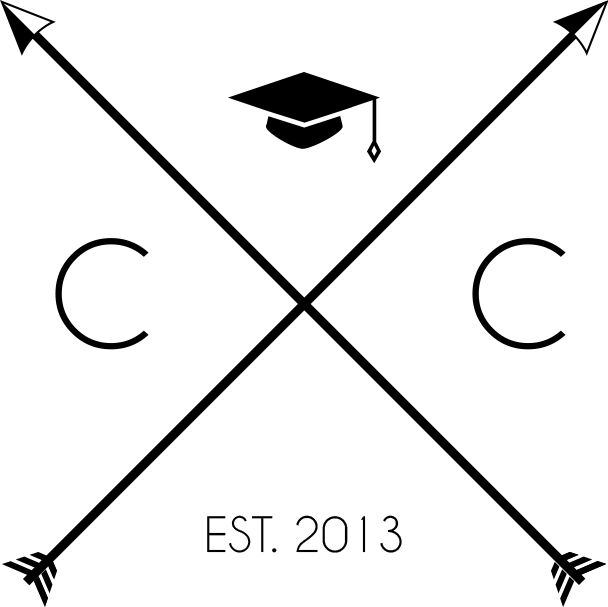
<style>
.page{position:relative;width:608px;height:607px;background:#ffffff}
.page>*{position:absolute;margin:0}
.t1{font:139.1px "CaviarDreams";color:#000000}
.t2{font:45.7px "CaviarDreams";color:#000000}
</style>
<div class="page">
<p class="t1" style="left:55px;top:238px;width:94px;height:112px">C</p>
<p class="t1" style="left:472px;top:238px;width:94px;height:112px">C</p>
<p class="t2" style="left:207px;top:515px;width:195px;height:38px">EST. 2013</p>
</div>
